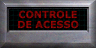
<style>
.page{position:relative;width:96px;height:48px}
.page>*{position:absolute;margin:0}
.t1{font:9.8px/10px "Verdana-Bold";color:#830404}
</style>
<div class="page">
<p class="t1" style="left:18px;top:10px;width:61px;height:19px;text-align:center">CONTROLE<br>DE ACESSO</p>
</div>
